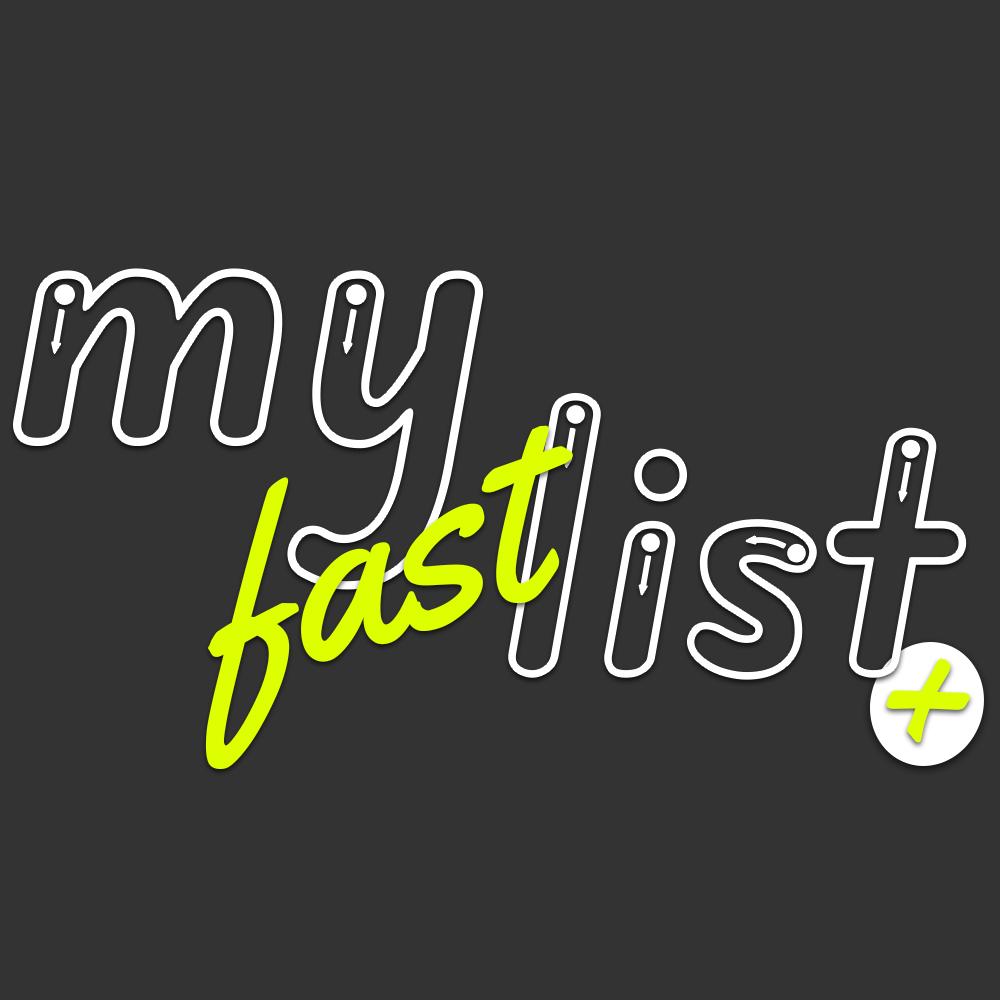
<style>
.page{position:relative;width:1000px;height:1000px;background:#333333}
.page>*{position:absolute;margin:0}
.t1{font:334.7px "EduAUVICWANTArrows-Bold";color:#ffffff}
.t2{font:298.5px "EduAUVICWANTArrows-Bold";color:#ffffff}
.t3{font:254px "Yellowtail-Regular";color:#deff00}
.t4{font:238.2px "Yellowtail-Regular";color:#deff00}
</style>
<div class="page">
<p class="t1" style="left:14px;top:269px;width:469px;height:320px">my</p>
<p class="t2" style="left:509px;top:393px;width:457px;height:286px">list</p>
<p class="t3" style="left:205px;top:425px;width:368px;height:344px;rotate:-17deg">fast</p>
<p class="t4" style="left:886px;top:658px;width:84px;height:85px">+</p>
</div>
